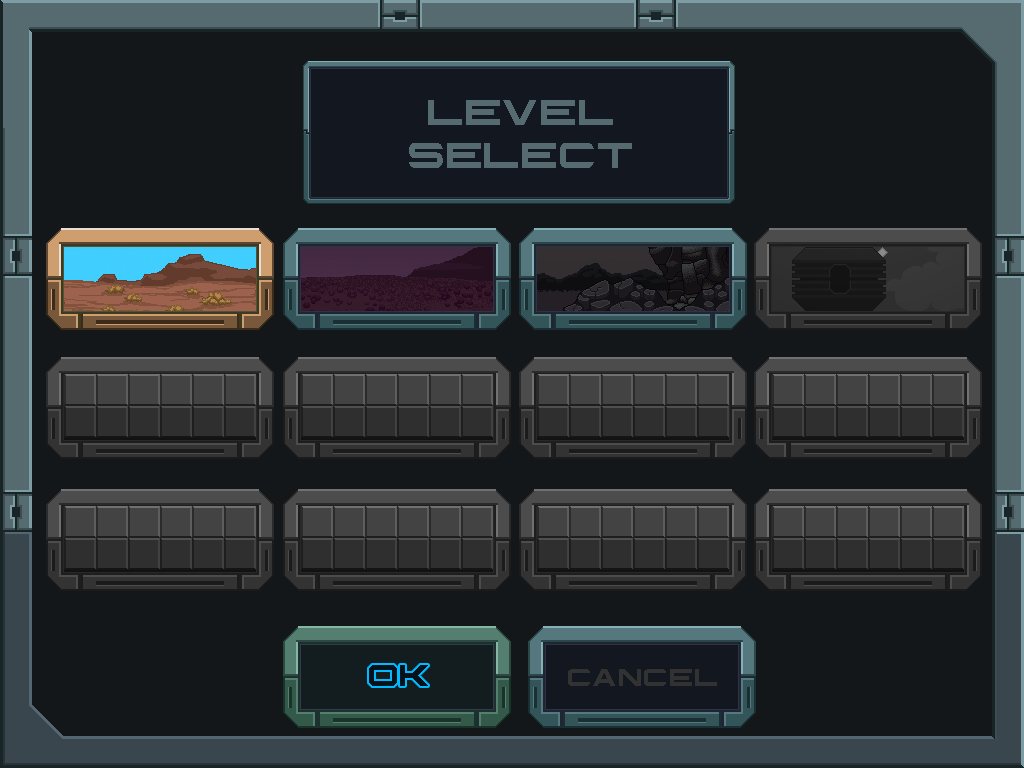
<style>
.page{position:relative;width:1024px;height:768px;background:#13171a}
.page>*{position:absolute;margin:0}
.t1{font:36px "InfiniumGuardian";letter-spacing:0.02em;color:#556b6f}
.t2{font:30px "InfiniumGuardian";letter-spacing:0.02em;color:#05121b}
.t3{font:24px "InfiniumGuardian";letter-spacing:0.02em;color:#323232}
</style>
<div class="page">
<p class="t1" style="left:409px;top:100px;width:223px;height:68px;text-align:center">LEVEL<br>SELECT</p>
<p class="t2" style="left:369px;top:665px;width:59px;height:21px">OK</p>
<p class="t3" style="left:568px;top:669px;width:149px;height:17px">CANCEL</p>
</div>
